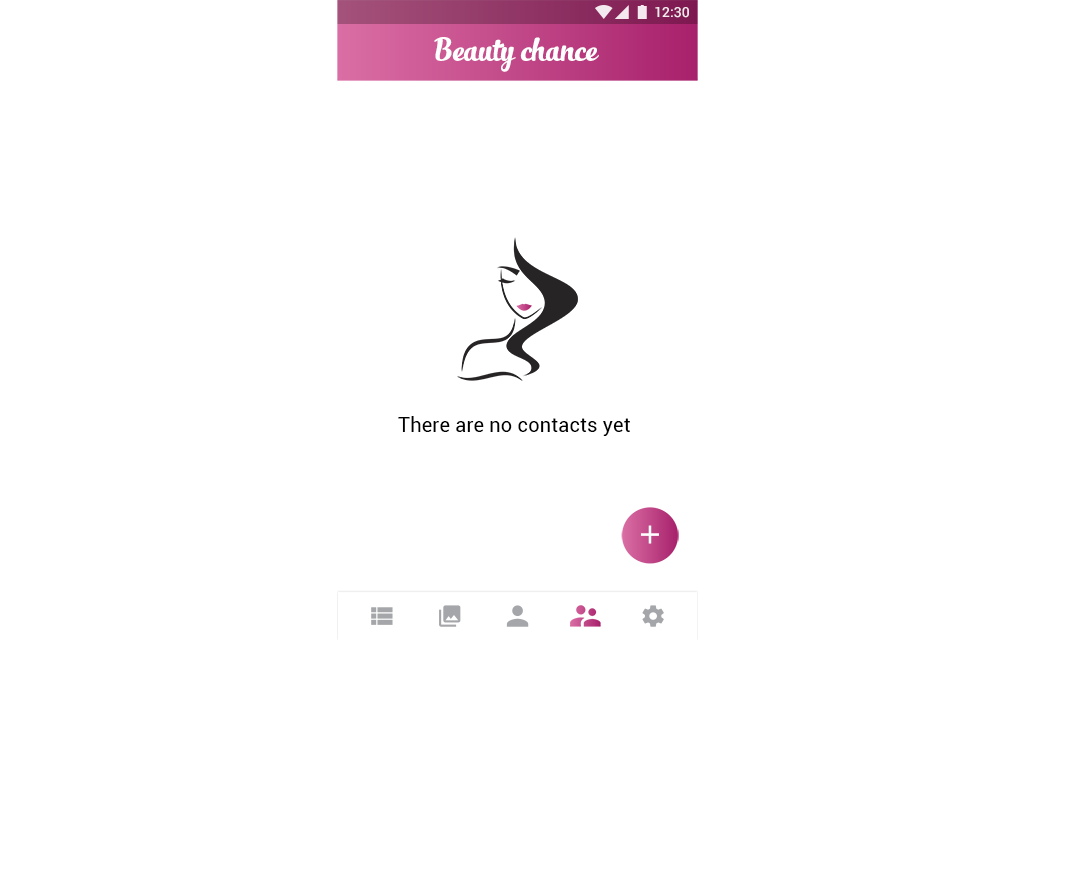
<style>
.page{position:relative;width:1080px;height:896px;background:#ffffff}
.page>*{position:absolute;margin:0}
.t1{font:14px "Roboto-Medium";color:#ffffff}
.t2{font:24px "SlimTony-Italic";color:#ffffff}
.t3{font:20px "Roboto-Regular";letter-spacing:0.01em;color:#000000}
</style>
<div class="page">
<p class="t1" style="left:655px;top:7px;width:34px;height:11px">12:30</p>
<p class="t2" style="left:434px;top:37px;width:165px;height:35px">Beauty chance</p>
<p class="t3" style="left:398px;top:416px;width:232px;height:20px">There are no contacts yet</p>
</div>
